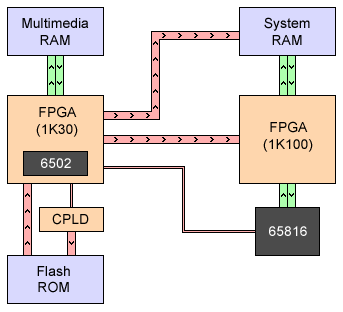
<style>
.page{position:relative;width:343px;height:312px;background:#ffffff}
.page>*{position:absolute;margin:0}
.t1{font:14px "ArialMT";color:#000000}
.t2{font:14px "ArialMT";color:#ffffff}
</style>
<div class="page">
<p class="t1" style="left:264px;top:17px;width:46px;height:28px;text-align:center">System<br>RAM</p>
<p class="t1" style="left:22px;top:18px;width:67px;height:27px;text-align:center">Multimedia<br>RAM</p>
<p class="t1" style="left:36px;top:106px;width:42px;height:31px;text-align:center">FPGA<br>(1K30)</p>
<p class="t1" style="left:263px;top:121px;width:50px;height:31px;text-align:center">FPGA<br>(1K100)</p>
<p class="t2" style="left:41px;top:158px;width:30px;height:10px">6502</p>
<p class="t1" style="left:52px;top:213px;width:37px;height:12px">CPLD</p>
<p class="t2" style="left:269px;top:226px;width:38px;height:10px">65816</p>
<p class="t1" style="left:37px;top:266px;width:33px;height:27px;text-align:center">Flash<br>ROM</p>
</div>
